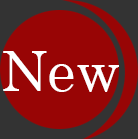
<style>
.page{position:relative;width:138px;height:139px;background:#980505}
.page>*{position:absolute;margin:0}
.t1{font:56.4px "Century";color:#ffffff}
</style>
<div class="page">
<p class="t1" style="left:3px;top:51px;width:116px;height:41px">New</p>
</div>
